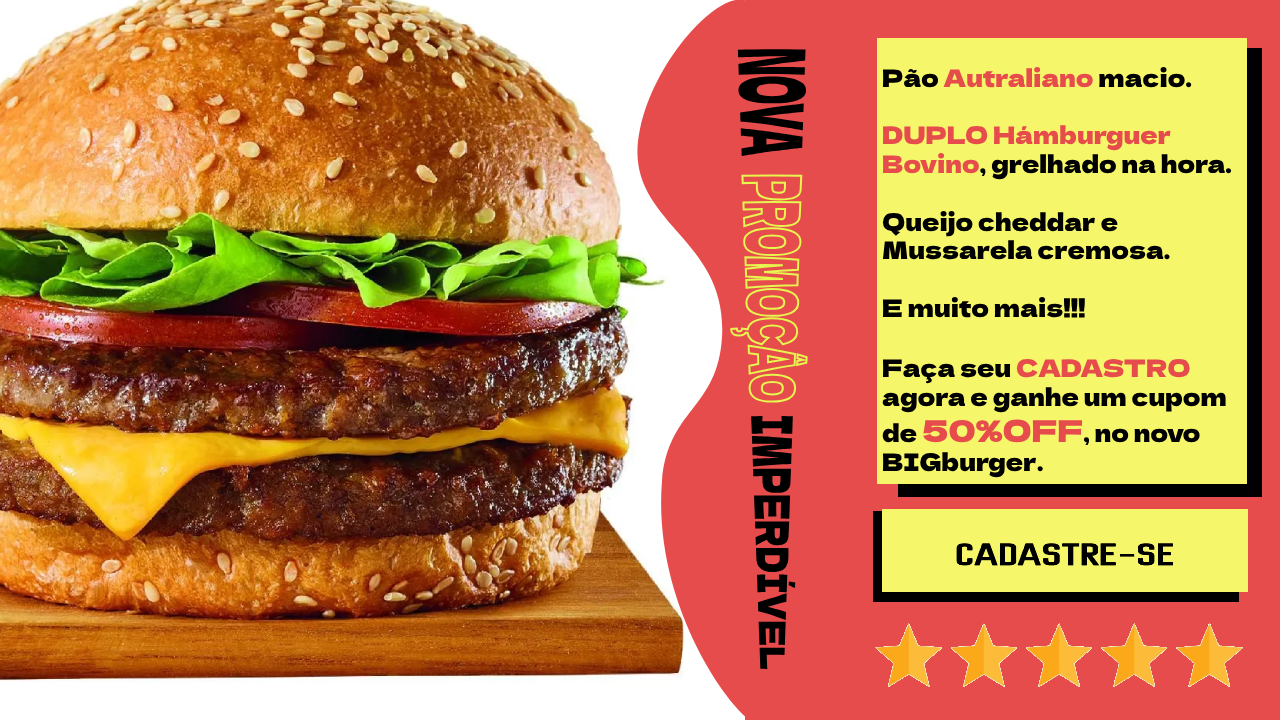
<style>
.page{position:relative;width:1280px;height:720px;background:#e64c4c}
.page>*{position:absolute;margin:0}
.t1{font:30px "DelaGothicOne-Regular";color:#000000}
.t2{font:30px "DelaGothicOne-Regular";color:#e64c4c}
.t3{font:24px "DelaGothicOne-Regular";color:#000000}
.t4{font:24px "DelaGothicOne-Regular";color:#e64c4c}
.t5{font:45px "Dhurjati";color:#000000}
</style>
<div class="page">
<p class="t1" style="left:730px;top:48px;width:78px;height:623px;rotate:89deg">NOVA   <span class="t2">PROMOÇÂO  </span>IMPERDÍVEL</p>
<p class="t3" style="left:882px;top:67px;width:350px;height:411px;text-align:center">Pão <span class="t4">Autraliano </span>macio.<br><br><span class="t4">DUPLO Hámburguer Bovino</span>, grelhado na hora.<br><br>Queijo cheddar e Mussarela cremosa.<br><br>E muito mais!!!<br><br>Faça seu <span class="t4">CADASTRO </span>agora e ganhe um cupom de <span class="t2">50%OFF</span>, no novo BIGburger.</p>
<p class="t5" style="left:956px;top:543px;width:217px;height:23px">CADASTRE-SE</p>
</div>
